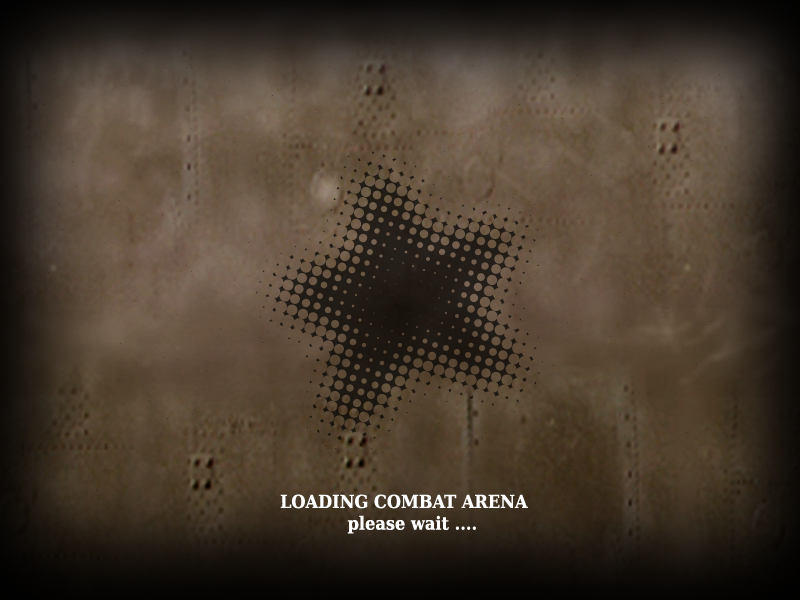
<style>
.page{position:relative;width:800px;height:600px}
.page>*{position:absolute;margin:0}
.t1{font:18px "DejaVuSerifCondensed-Bold";color:#ffffff}
</style>
<div class="page">
<p class="t1" style="left:280px;top:494px;width:248px;height:40px">LOADING COMBAT ARENA<br>            please wait ....</p>
</div>
